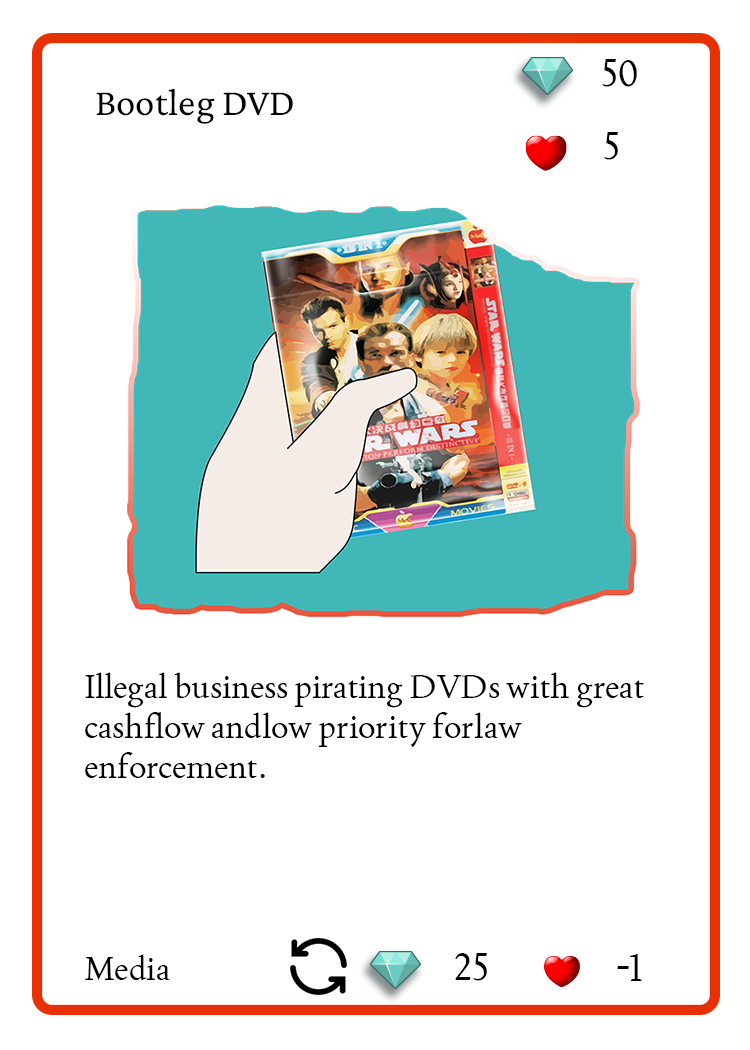
<style>
.page{position:relative;width:750px;height:1050px;background:#ffffff}
.page>*{position:absolute;margin:0}
.t1{font:37.5px "Joan-Regular";color:#000000;text-transform:uppercase}
.t2{font:38.9px "CrimsonPro-Regular";color:#000000}
.t3{font:33.3px "Joan-Regular";color:#000000}
</style>
<div class="page">
<p class="t1" style="left:602px;top:59px;width:35px;height:28px">50</p>
<p class="t2" style="left:96px;top:88px;width:197px;height:36px">Bootleg DVD</p>
<p class="t1" style="left:604px;top:132px;width:14px;height:28px">5</p>
<p class="t3" style="left:85px;top:672px;width:559px;height:106px">Illegal business pirating DVDs with great cashflow andlow priority forlaw enforcement.</p>
<p class="t1" style="left:455px;top:953px;width:32px;height:28px">25</p>
<p class="t3" style="left:85px;top:954px;width:85px;height:26px">Media</p>
<p class="t1" style="left:617px;top:954px;width:25px;height:27px">-1</p>
</div>
